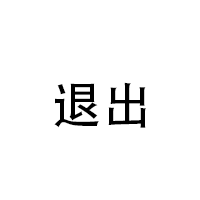
<style>
.page{position:relative;width:200px;height:200px;background:#ffffff}
.page>*{position:absolute;margin:0}
.t1{font:50px "AdobeHeitiStd-Regular";color:#000000}
</style>
<div class="page">
<p class="t1" style="left:54px;top:82px;width:92px;height:46px">退出</p>
</div>
